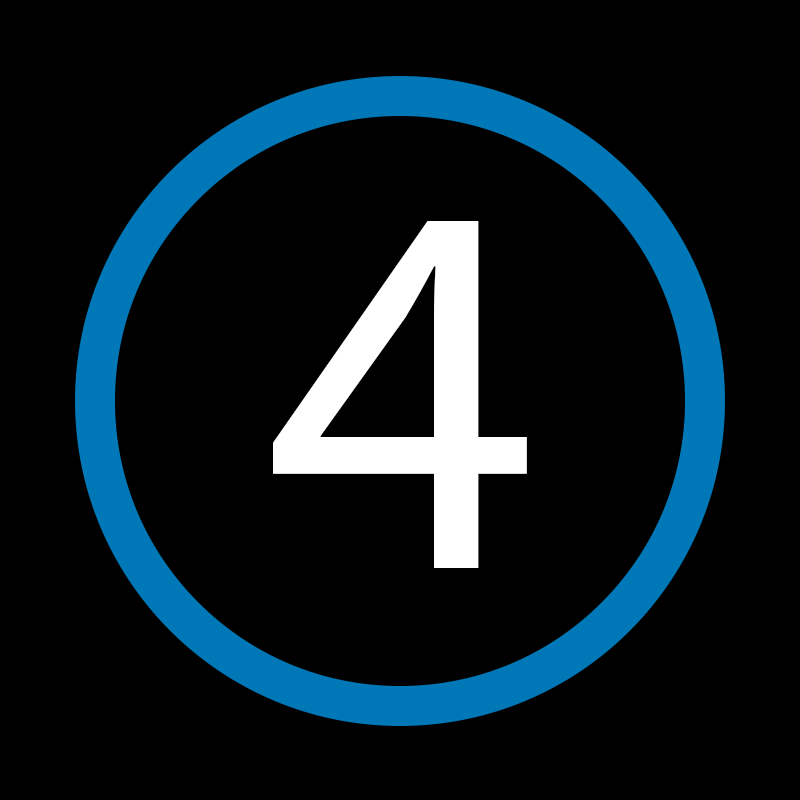
<style>
.page{position:relative;width:800px;height:800px;background:#000000}
.page>*{position:absolute;margin:0}
.t1{font:533.3px "MyriadPro-Regular";color:#ffffff}
</style>
<div class="page">
<p class="t1" style="left:273px;top:221px;width:254px;height:347px">4</p>
</div>
